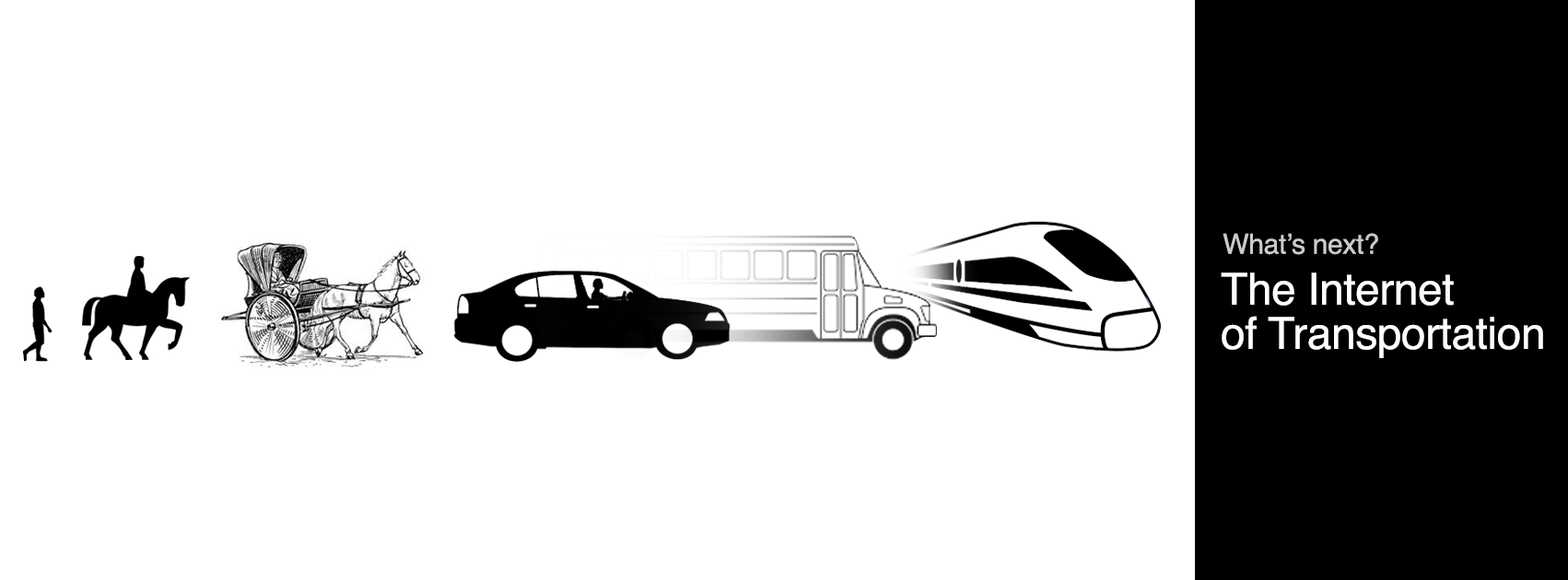
<style>
.page{position:relative;width:1568px;height:580px;background:#ffffff}
.page>*{position:absolute;margin:0}
.t1{font:27.6px "Helvetica";letter-spacing:-0.01em;color:#cbcbcb}
.t2{font:44.2px/44.2px "Helvetica";letter-spacing:-0.01em;color:#ffffff}
</style>
<div class="page">
<p class="t1" style="left:1223px;top:233px;width:155px;height:22px">What’s next?</p>
<p class="t2" style="left:1221px;top:273px;width:322px;height:85px">The Internet<br>of Transportation</p>
</div>
